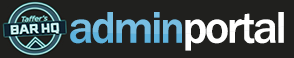
<style>
.page{position:relative;width:294px;height:58px;background:#20201e}
.page>*{position:absolute;margin:0}
.t1{font:45.8px "FranklinGothic-Medium";letter-spacing:-0.05em;color:#ffffff}
.t2{font:45.8px "FranklinGothic-Medium";letter-spacing:-0.05em;color:#5db2dd}
</style>
<div class="page">
<p class="t1" style="left:70px;top:12px;width:214px;height:39px"><span class="t2">admin</span>portal</p>
</div>
